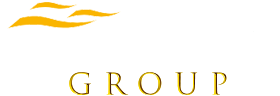
<style>
.page{position:relative;width:280px;height:96px;background:#ffffff}
.page>*{position:absolute;margin:0}
.t1{font:29px "TrajanColor-Concept";letter-spacing:0.38em}
</style>
<div class="page">
<p class="t1" style="left:69px;top:72px;width:158px;height:23px">GROUP</p>
</div>
